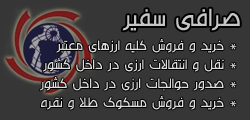
<style>
.page{position:relative;width:250px;height:120px;background:#363636}
.page>*{position:absolute;margin:0}
.t1{font:36px "B-Ekhlass";color:#c6c6c6}
.t2{font:20px/19px "B-Ekhlass";color:#c6c6c6}
</style>
<div class="page">
<p class="t1" style="left:122px;top:8px;width:118px;height:23px">صرافی سفیر</p>
<p class="t2" style="left:39px;top:39px;width:198px;height:71px">* خريد و فروش کليه ارزهای معتبر<br>* نقل و انتقالات ارزی در داخل کشور<br>* صدور حوالجات ارزی در داخل کشور<br>* خريد و فروش مسکوک طلا و نقره</p>
</div>
